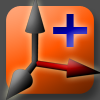
<style>
.page{position:relative;width:100px;height:100px}
.page>*{position:absolute;margin:0}
.t1{font:53.9px "Tahoma-Bold"}
</style>
<div class="page">
<p class="t1" style="left:53px;top:14px;width:35px;height:33px">+</p>
</div>
